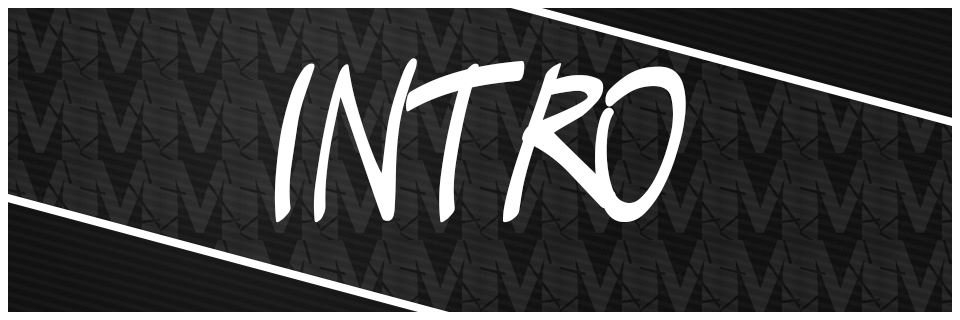
<style>
.page{position:relative;width:960px;height:320px}
.page>*{position:absolute;margin:0}
.t1{font:150px "Lush-Regular";color:#ffffff}
</style>
<div class="page">
<p class="t1" style="left:274px;top:58px;width:412px;height:165px">INTRO</p>
</div>
